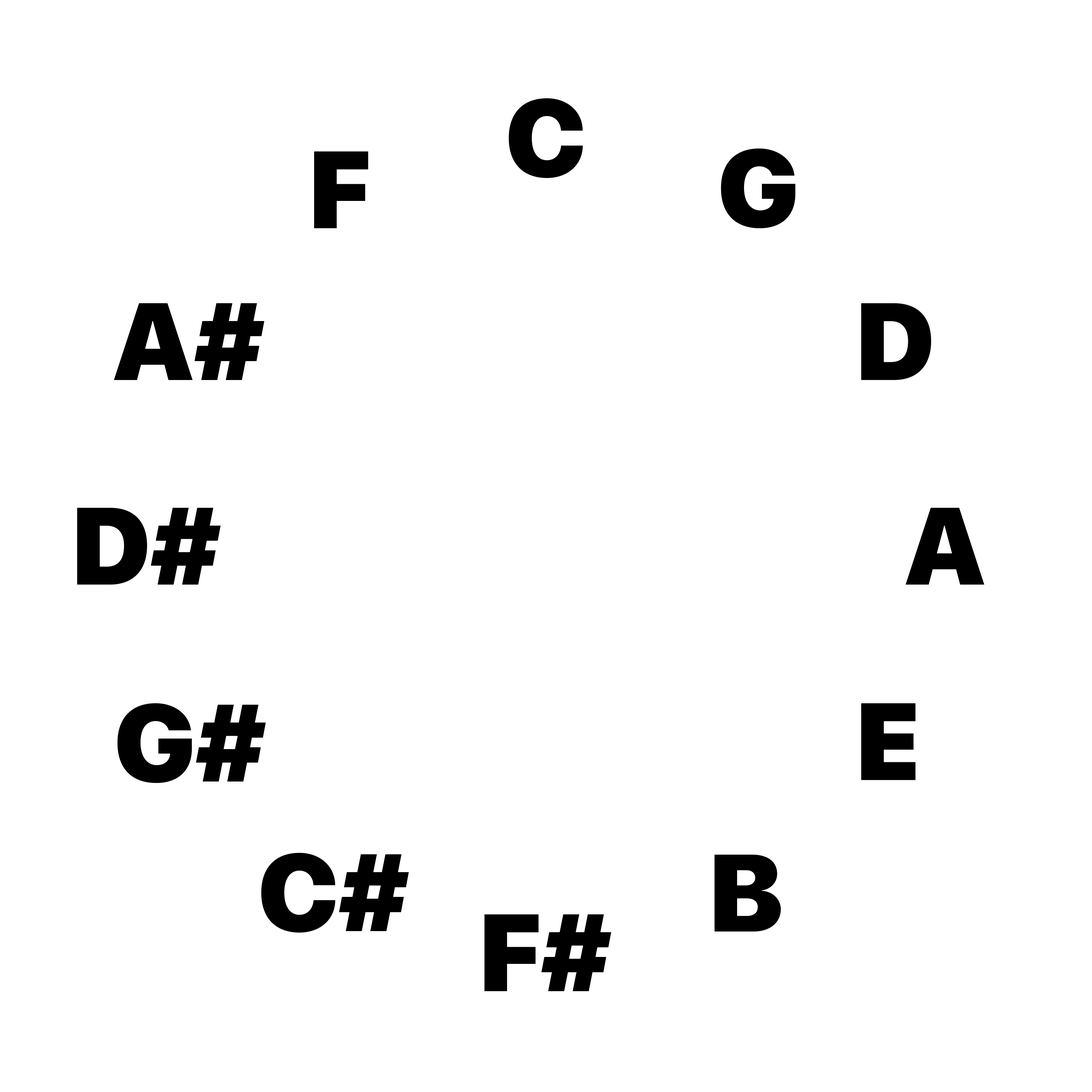
<style>
.page{position:relative;width:1092px;height:1092px;background:#ffffff}
.page>*{position:absolute;margin:0}
.t1{font:109.2px "SFUIDisplay-Black";color:#000000}
</style>
<div class="page">
<p class="t1" style="left:509px;top:98px;width:74px;height:80px">C</p>
<p class="t1" style="left:721px;top:149px;width:74px;height:80px">G</p>
<p class="t1" style="left:314px;top:151px;width:54px;height:77px">F</p>
<p class="t1" style="left:114px;top:303px;width:150px;height:77px">A#</p>
<p class="t1" style="left:861px;top:303px;width:70px;height:77px">D</p>
<p class="t1" style="left:77px;top:508px;width:144px;height:77px">D#</p>
<p class="t1" style="left:906px;top:508px;width:78px;height:77px">A</p>
<p class="t1" style="left:117px;top:703px;width:149px;height:80px">G#</p>
<p class="t1" style="left:861px;top:703px;width:54px;height:77px">E</p>
<p class="t1" style="left:261px;top:853px;width:148px;height:80px">C#</p>
<p class="t1" style="left:715px;top:854px;width:66px;height:78px">B</p>
<p class="t1" style="left:484px;top:914px;width:127px;height:77px">F#</p>
</div>
